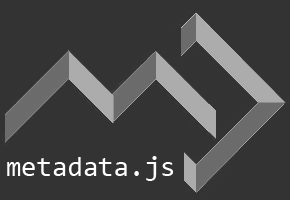
<style>
.page{position:relative;width:290px;height:200px;background:#333333}
.page>*{position:absolute;margin:0}
.t1{font:28px "Consolas";color:#ffffff}
</style>
<div class="page">
<p class="t1" style="left:7px;top:156px;width:166px;height:25px">metadata.js</p>
</div>
